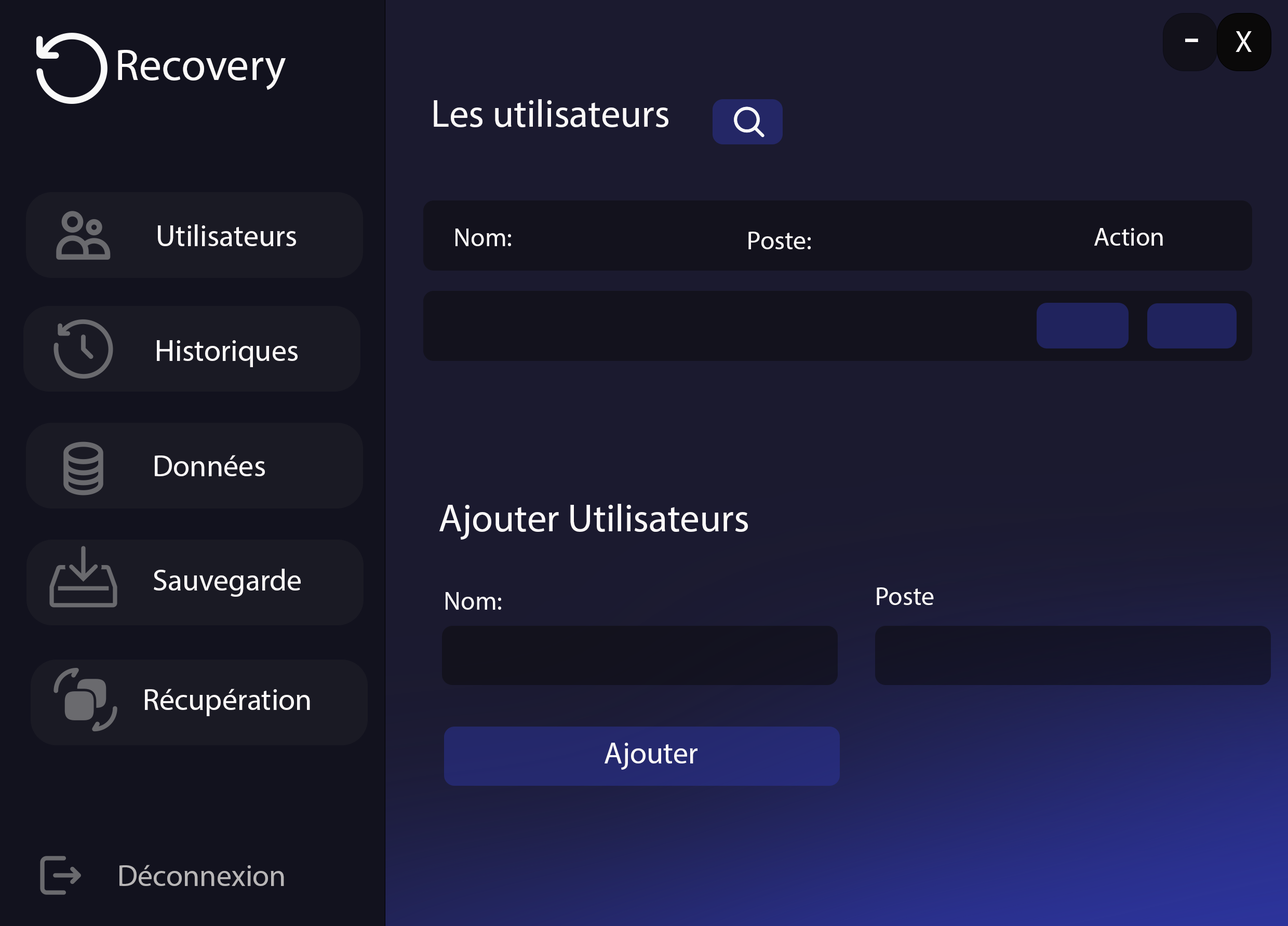
<style>
.page{position:relative;width:1288px;height:926px;background:#1b1a2f}
.page>*{position:absolute;margin:0}
.t1{font:51.9px "MyriadPro-Regular";color:#fcf9f9}
.t2{font:30.3px "MyriadPro-Regular";color:#fcf9f9}
.t3{font:44.8px "MyriadPro-Regular";color:#fcf9f9}
.t4{font:38.9px "MyriadPro-Regular";color:#fcf9f9}
.t5{font:26px "MyriadPro-Regular";color:#fcf9f9}
.t6{font:30.3px "MyriadPro-Regular";color:#b8b6b7}
</style>
<div class="page">
<p class="t1" style="left:1185px;top:38px;width:13px;height:4px">-</p>
<p class="t2" style="left:1235px;top:31px;width:17px;height:21px">X</p>
<p class="t3" style="left:118px;top:50px;width:168px;height:40px">Recovery</p>
<p class="t4" style="left:434px;top:99px;width:234px;height:28px">Les utilisateurs</p>
<p class="t2" style="left:158px;top:224px;width:138px;height:22px">Utilisateurs</p>
<p class="t5" style="left:455px;top:228px;width:56px;height:18px">Nom:</p>
<p class="t5" style="left:748px;top:232px;width:63px;height:17px">Poste:</p>
<p class="t5" style="left:1094px;top:228px;width:69px;height:18px">Action</p>
<p class="t2" style="left:157px;top:340px;width:141px;height:27px">Historiques</p>
<p class="t2" style="left:155px;top:455px;width:110px;height:21px">Données</p>
<p class="t4" style="left:439px;top:504px;width:309px;height:36px">Ajouter Utilisateurs</p>
<p class="t2" style="left:154px;top:569px;width:147px;height:28px">Sauvegarde</p>
<p class="t5" style="left:446px;top:592px;width:55px;height:18px">Nom:</p>
<p class="t5" style="left:877px;top:587px;width:57px;height:18px">Poste</p>
<p class="t2" style="left:145px;top:689px;width:165px;height:27px">Récupération</p>
<p class="t2" style="left:604px;top:743px;width:93px;height:27px">Ajouter</p>
<p class="t6" style="left:119px;top:865px;width:165px;height:21px">Déconnexion</p>
</div>
